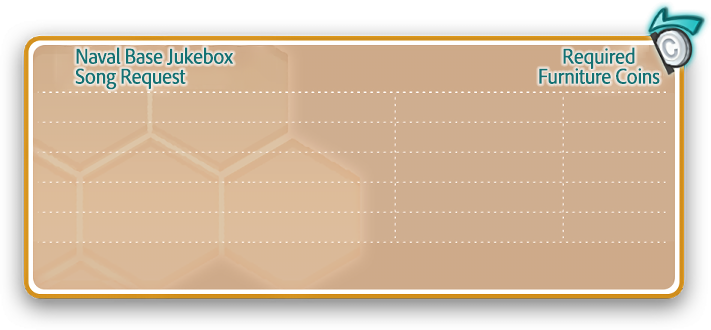
<style>
.page{position:relative;width:711px;height:330px}
.page>*{position:absolute;margin:0}
.t1{font:22px/20px "AdobeClean-Regular";letter-spacing:-0.04em;color:#137273;font-weight:bold;scale:0.9 1}
</style>
<div class="page">
<p class="t1" style="left:75px;top:47px;width:159px;height:43px">Naval Base Jukebox<br>Song Request</p>
<p class="t1" style="left:539px;top:47px;width:121px;height:37px;text-align:center">Required<br>Furniture Coins</p>
</div>
